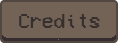
<style>
.page{position:relative;width:118px;height:43px;background:#736357}
.page>*{position:absolute;margin:0}
.t1{font:20px "VCROSDMono";color:#362f2d}
</style>
<div class="page">
<p class="t1" style="left:19px;top:14px;width:81px;height:14px">Credits</p>
</div>
